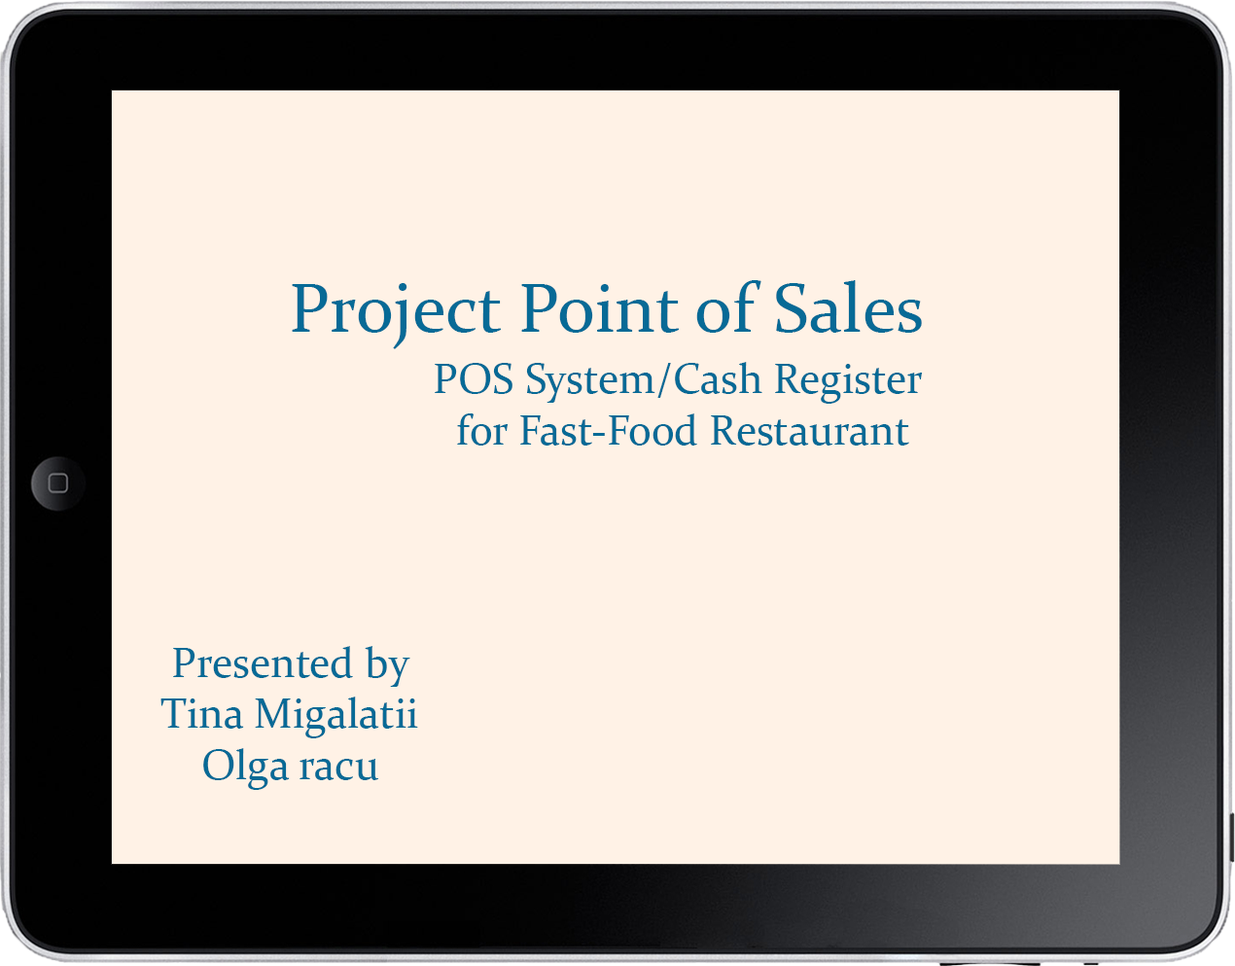
<style>
.page{position:relative;width:1235px;height:966px;background:#fff2e6}
.page>*{position:absolute;margin:0}
.t1{font:70px "Constantia";color:#076a96}
.t2{font:42.8px "Constantia";color:#076a96}
</style>
<div class="page">
<p class="t1" style="left:292px;top:280px;width:630px;height:69px">Project Point of Sales</p>
<p class="t2" style="left:435px;top:362px;width:488px;height:83px;text-align:center">POS System/Cash Register <br>for Fast-Food Restaurant</p>
<p class="t2" style="left:160px;top:646px;width:258px;height:144px;text-align:center">Presented by<br>Tina Migalatii<br>Olga racu</p>
</div>
